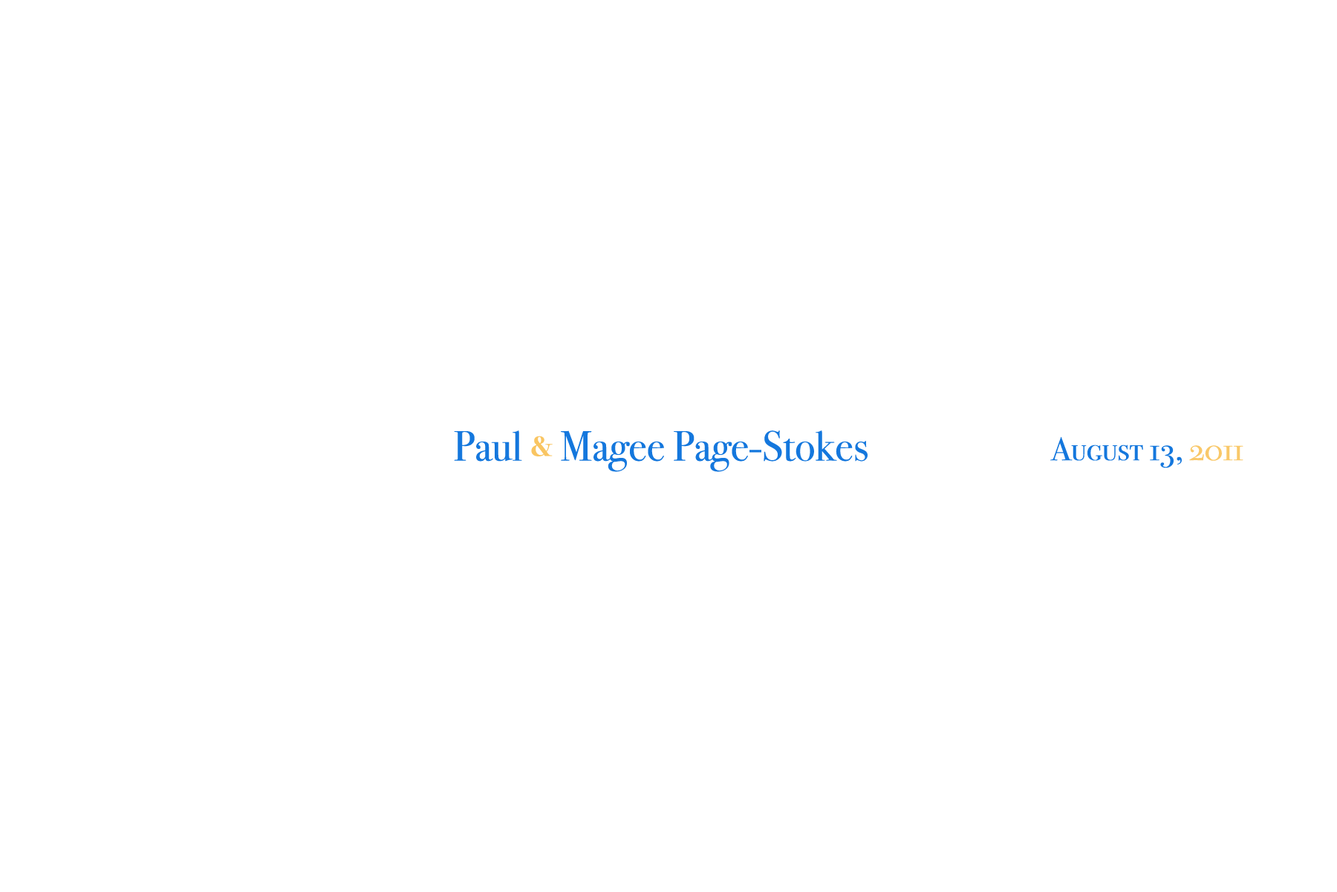
<style>
.page{position:relative;width:1337px;height:892px;background:#ffffff}
.page>*{position:absolute;margin:0}
.t1{font:42.3px "BodoniSvtyTwoOSITCTTBook";color:#1477dd}
.t2{font:27.9px "BodoniSvtyTwoOSITCTTBold";color:#f9c562}
.t3{font:32.8px "BodoniSvtyTwoSCITCTTBook";color:#1477dd}
.t4{font:32.8px "BodoniSvtyTwoSCITCTTBook";color:#f9c869}
</style>
<div class="page">
<p class="t1" style="left:454px;top:430px;width:414px;height:42px">Paul <span class="t2">&amp;</span> Magee Page-Stokes</p>
<p class="t3" style="left:1051px;top:436px;width:193px;height:32px">August 13, <span class="t4">2011</span></p>
</div>
